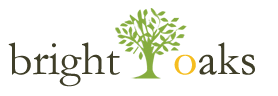
<style>
.page{position:relative;width:278px;height:96px;background:#ffffff}
.page>*{position:absolute;margin:0}
.t1{font:48px "Garamond";color:#3f3e28}
.t2{font:48px "Garamond";color:#f5bd20}
</style>
<div class="page">
<p class="t1" style="left:8px;top:42px;width:112px;height:45px">bright</p>
<p class="t1" style="left:174px;top:42px;width:81px;height:33px"><span class="t2">o</span>aks</p>
</div>
